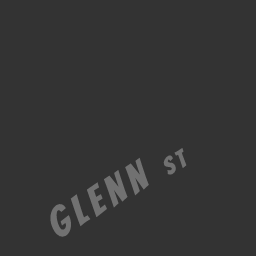
<style>
.page{position:relative;width:256px;height:256px;background:#333333}
.page>*{position:absolute;margin:0}
.t1{font:40px "Bangers-Regular";letter-spacing:0.16em;color:#717171}
.t2{font:24px "Bangers-Regular";letter-spacing:0.16em;color:#717171}
</style>
<div class="page">
<p class="t1" style="left:50px;top:148px;width:137px;height:89px;rotate:-30deg">GLENN <span class="t2">ST</span></p>
</div>
